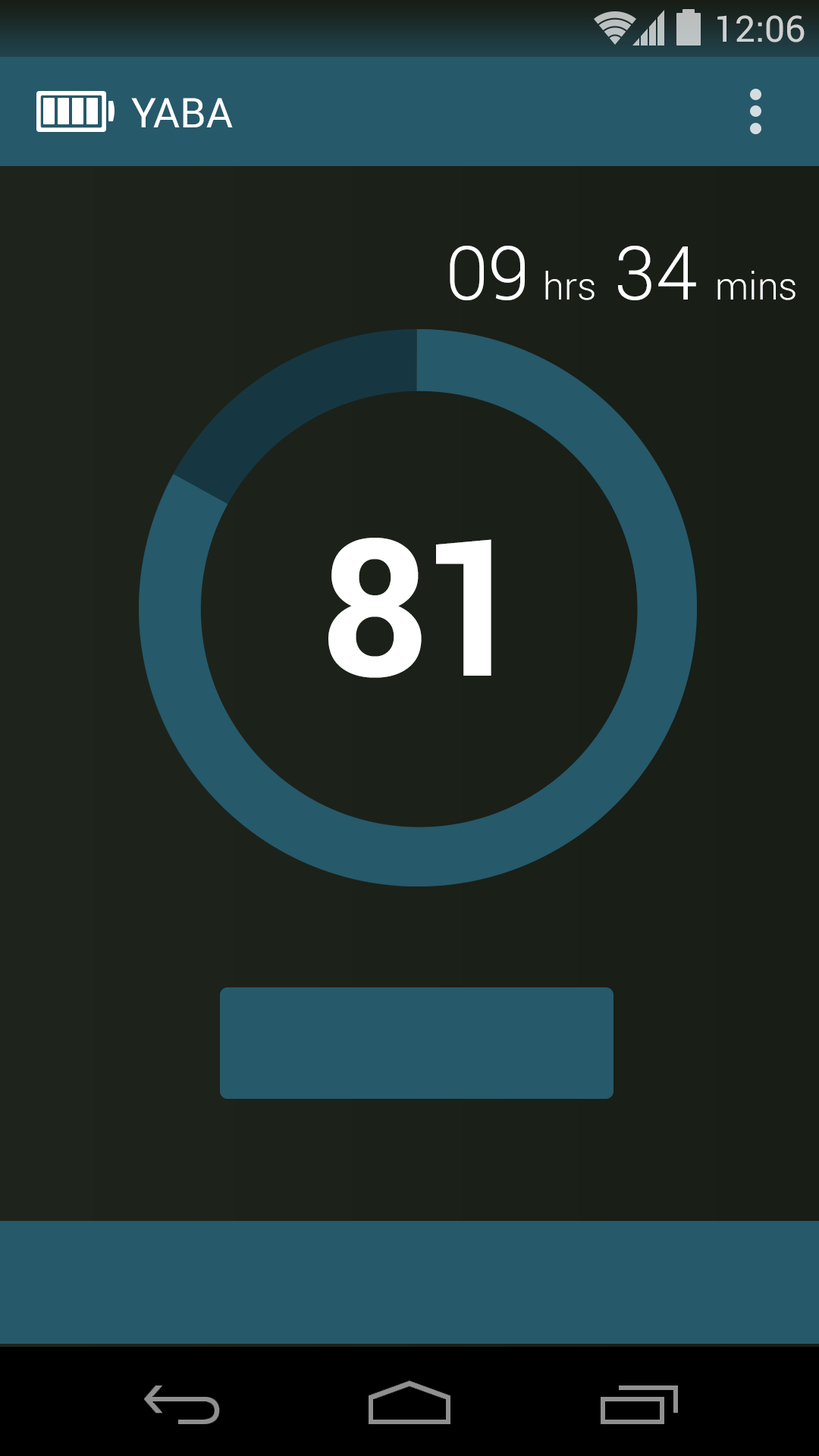
<style>
.page{position:relative;width:819px;height:1456px;background:#26596a}
.page>*{position:absolute;margin:0}
.t1{font:36.4px "Roboto-Regular";color:#ced0d0}
.t2{font:40.9px "Roboto-Regular";color:#ffffff}
.t3{font:37.9px "Roboto-Light";color:#ffffff}
.t4{font:74.7px "Roboto-Light";color:#ffffff}
.t5{font:191.1px "Roboto-Bold";letter-spacing:-0.05em;color:#ffffff}
</style>
<div class="page">
<p class="t1" style="left:717px;top:15px;width:88px;height:27px">12:06</p>
<p class="t2" style="left:131px;top:98px;width:102px;height:29px">YABA</p>
<p class="t3" style="left:450px;top:246px;width:345px;height:54px"><span class="t4">09 </span>hrs<span class="t4"> 34 </span>mins</p>
<p class="t5" style="left:328px;top:538px;width:163px;height:140px">81</p>
</div>
